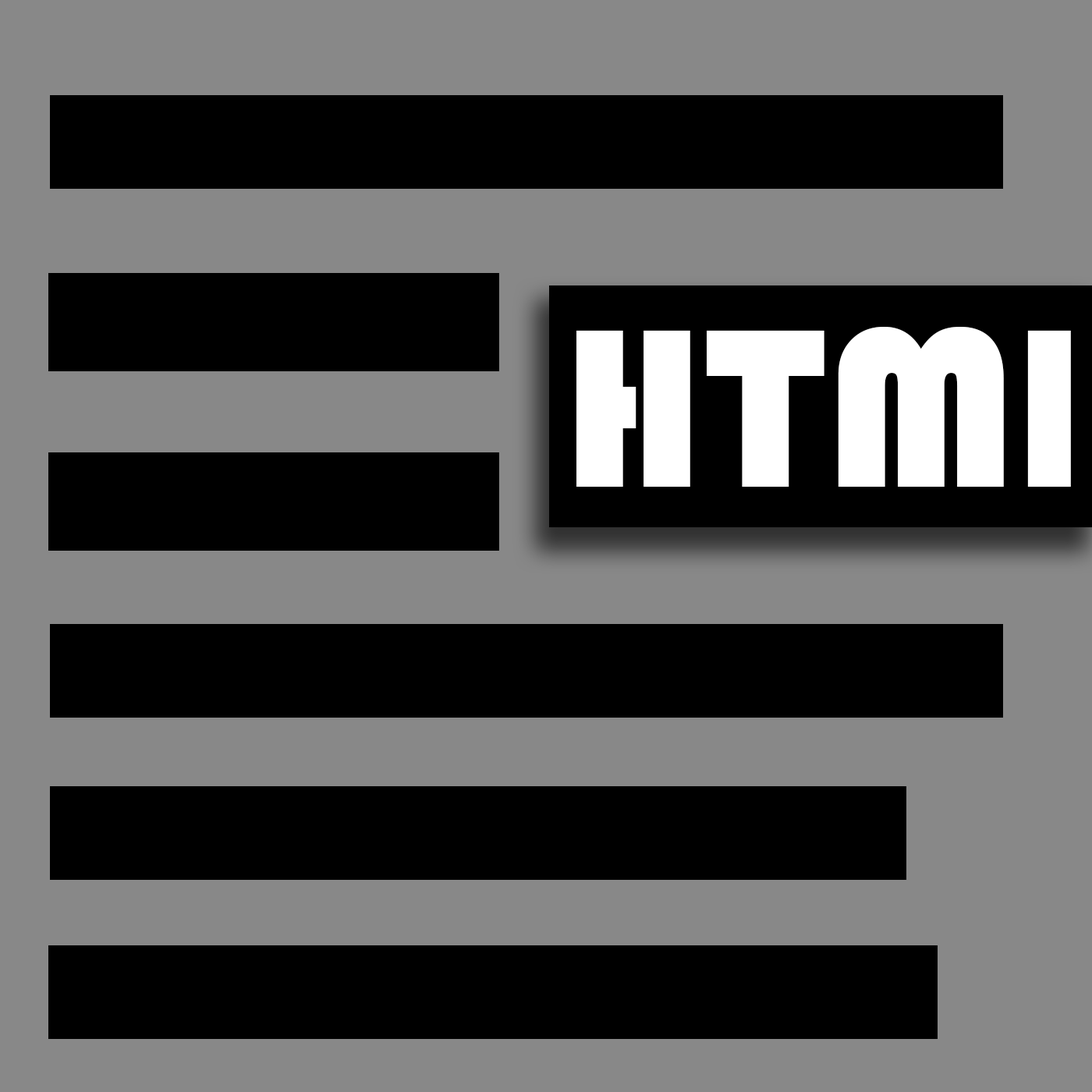
<style>
.page{position:relative;width:1092px;height:1092px;background:#888888}
.page>*{position:absolute;margin:0}
.t1{font:234px "Bauhaus93";color:#ffffff}
</style>
<div class="page">
<p class="t1" style="left:576px;top:326px;width:495px;height:161px">HTMl</p>
</div>
